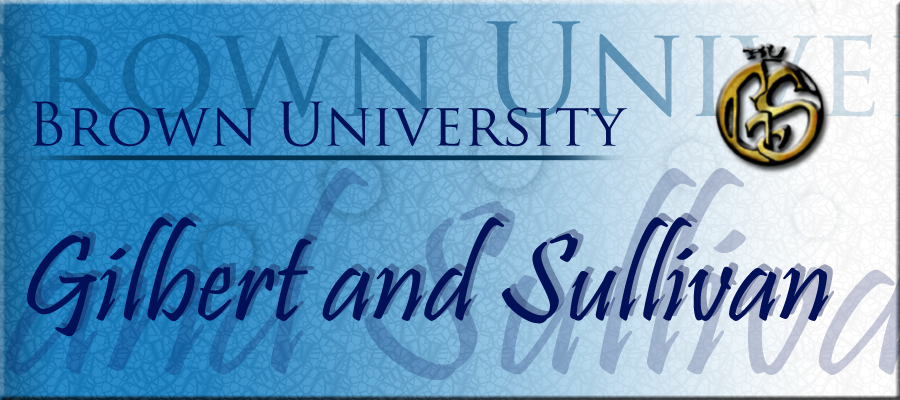
<style>
.page{position:relative;width:900px;height:400px}
.page>*{position:absolute;margin:0}
.t1{font:58.3px "TrajanPro-Regular";color:#021058}
.t2{font:125px "Pristina-Regular";color:#021058}
.t3{font:125px "Pristina-Regular"}
</style>
<div class="page">
<p class="t1" style="left:32px;top:101px;width:595px;height:46px">Brown University</p>
<p class="t2" style="left:27px;top:217px;width:802px;height:120px">Gilbert and Sullivan</p>
<p class="t3" style="left:33px;top:212px;width:801px;height:120px">Gilbert and Sullivan</p>
</div>
